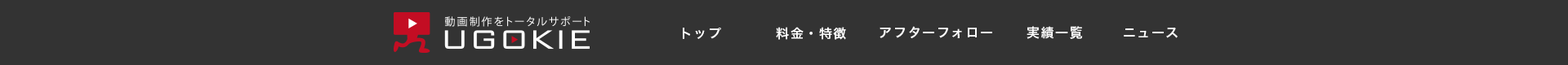
<style>
.page{position:relative;width:1568px;height:65px;background:#333333}
.page>*{position:absolute;margin:0}
.t1{font:13.1px "HiraginoSansUpr-W6";letter-spacing:0.101em;color:#ffffff}
</style>
<div class="page">
<p class="t1" style="left:683px;top:28px;width:38px;height:11px">トップ</p>
<p class="t1" style="left:776px;top:27px;width:70px;height:13px">料金・特徴</p>
<p class="t1" style="left:880px;top:26px;width:112px;height:13px">アフターフォロー</p>
<p class="t1" style="left:1027px;top:26px;width:56px;height:13px">実績一覧</p>
<p class="t1" style="left:1124px;top:28px;width:54px;height:10px">ニュース</p>
</div>
